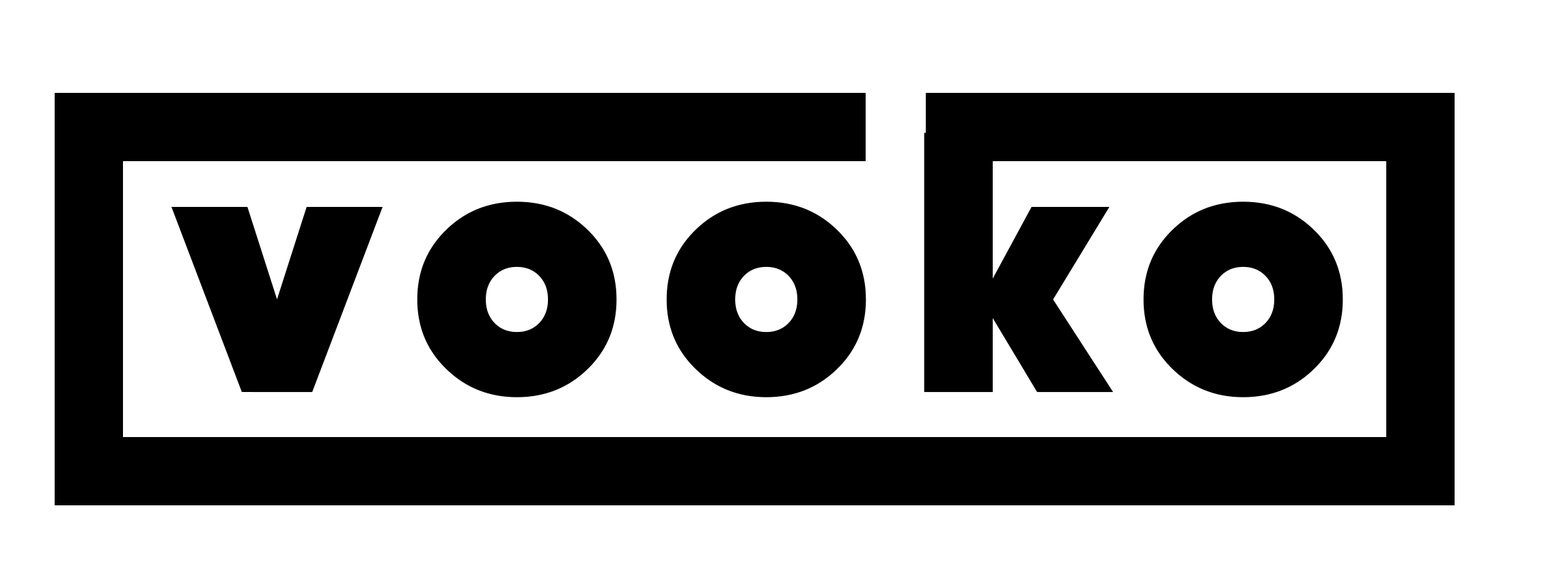
<style>
.page{position:relative;width:1568px;height:575px;background:#ffffff}
.page>*{position:absolute;margin:0}
.t1{font:370.1px "Gilroy-Heavy";letter-spacing:0.1em;color:#000000}
</style>
<div class="page">
<p class="t1" style="left:171px;top:133px;width:1172px;height:265px">vooko</p>
</div>
